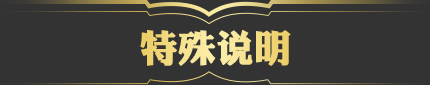
<style>
.page{position:relative;width:430px;height:85px;background:#333333}
.page>*{position:absolute;margin:0}
.t1{font:37px "DFPLiJinHeiW8";text-transform:uppercase;font-weight:bold}
</style>
<div class="page">
<p class="t1" style="left:140px;top:30px;width:151px;height:36px">特殊说明</p>
</div>
